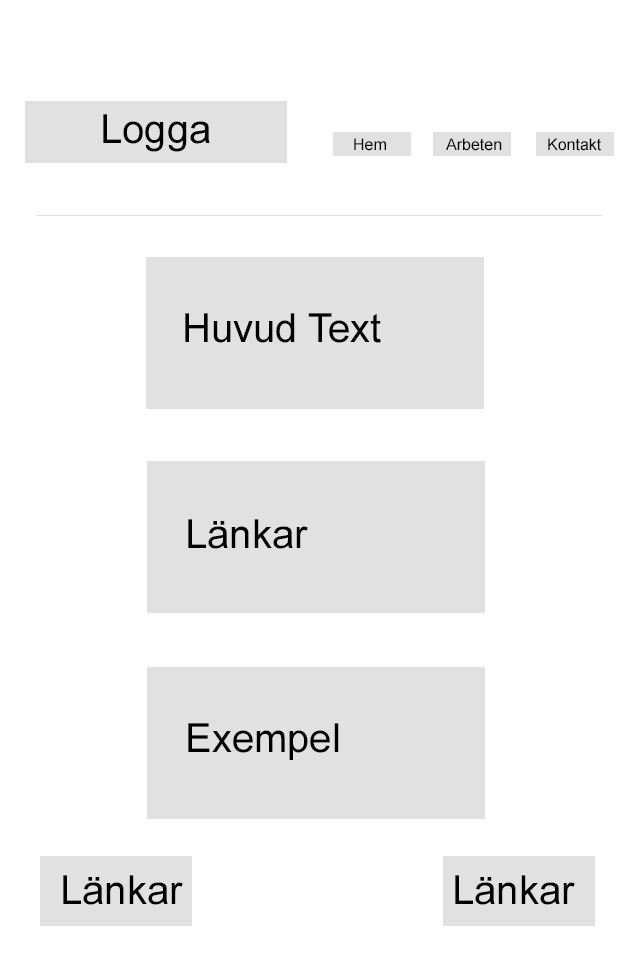
<style>
.page{position:relative;width:640px;height:960px;background:#ffffff}
.page>*{position:absolute;margin:0}
.t1{font:40px "ArialMT";color:#000000}
.t2{font:16px "ArialMT";color:#000000}
</style>
<div class="page">
<p class="t1" style="left:103px;top:114px;width:107px;height:38px">Logga</p>
<p class="t2" style="left:354px;top:138px;width:32px;height:13px">Hem</p>
<p class="t2" style="left:446px;top:138px;width:56px;height:13px">Arbeten</p>
<p class="t2" style="left:548px;top:138px;width:53px;height:13px">Kontakt</p>
<p class="t1" style="left:185px;top:313px;width:196px;height:30px">Huvud Text</p>
<p class="t1" style="left:188px;top:519px;width:120px;height:30px">Länkar</p>
<p class="t1" style="left:188px;top:723px;width:151px;height:37px">Exempel</p>
<p class="t1" style="left:63px;top:875px;width:120px;height:30px">Länkar</p>
<p class="t1" style="left:455px;top:875px;width:120px;height:30px">Länkar</p>
</div>
